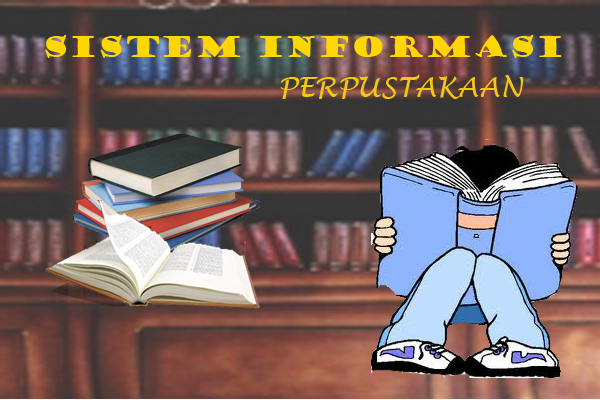
<style>
.page{position:relative;width:600px;height:400px}
.page>*{position:absolute;margin:0}
.t1{font:28.1px "GoudyStout";color:#ffd600}
.t2{font:28.1px "LucidaHandwriting-Italic";color:#f4c712}
</style>
<div class="page">
<p class="t1" style="left:45px;top:35px;width:517px;height:23px">SISTEM INFORMASI</p>
<p class="t2" style="left:280px;top:74px;width:244px;height:25px">PERPUSTAKAAN</p>
</div>
